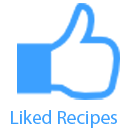
<style>
.page{position:relative;width:128px;height:128px;background:#ffffff}
.page>*{position:absolute;margin:0}
.t1{font:19.2px "MyriadPro-Regular";color:#3ca0ff}
</style>
<div class="page">
<p class="t1" style="left:11px;top:110px;width:106px;height:18px">Liked Recipes</p>
</div>
